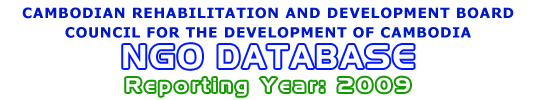
<style>
.page{position:relative;width:533px;height:100px;background:#ffffff}
.page>*{position:absolute;margin:0}
.t1{font:13.9px/19.4px "Verdana-Bold";letter-spacing:0.05em;color:#0018c6}
.t2{font:31.9px "Niamey";letter-spacing:0.1em;color:#fefefe;scale:0.94 1}
.t3{font:19.4px "Niamey";letter-spacing:0.2em;color:#fefefe}
</style>
<div class="page">
<p class="t1" style="left:22px;top:7px;width:492px;height:31px;text-align:center">CAMBODIAN REHABILITATION AND DEVELOPMENT BOARD<br>COUNCIL FOR THE DEVELOPMENT OF CAMBODIA</p>
<p class="t2" style="left:123px;top:44px;width:291px;height:25px">NGO DATABASE</p>
<p class="t3" style="left:126px;top:77px;width:284px;height:19px">Reporting Year: 2009</p>
</div>
